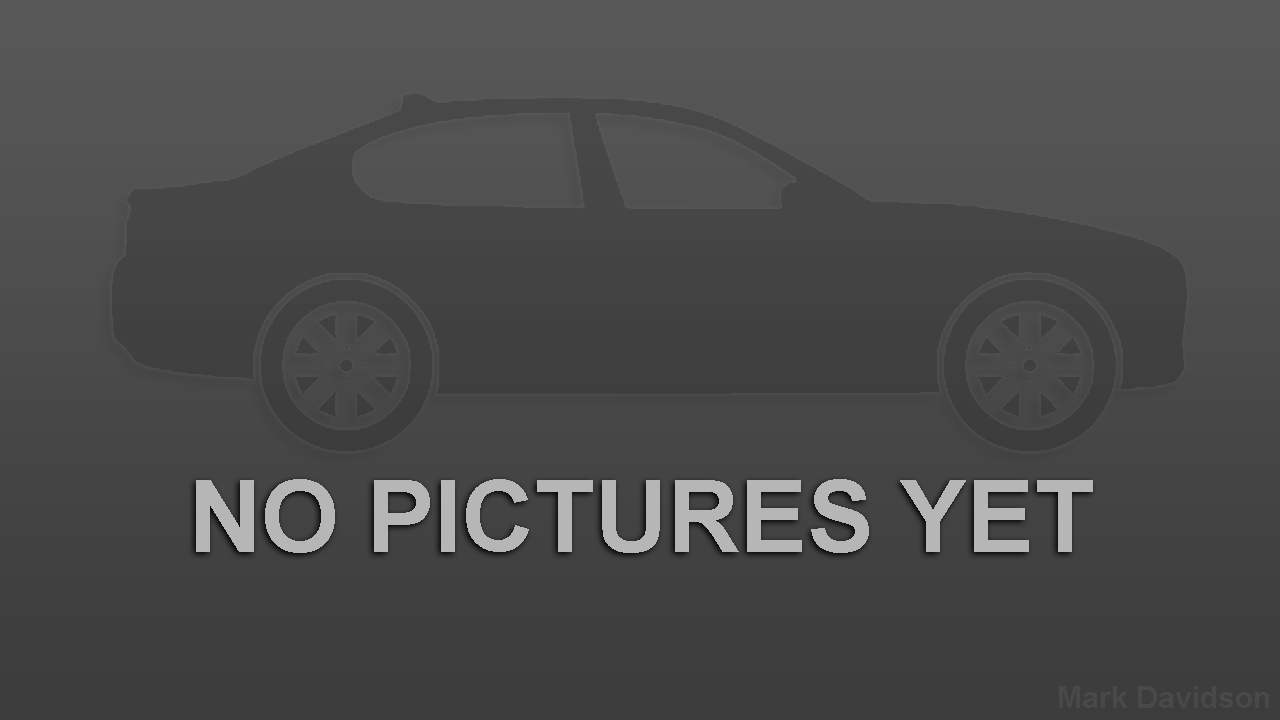
<style>
.page{position:relative;width:1280px;height:720px}
.page>*{position:absolute;margin:0}
.t1{font:100.3px "Arial-BoldMT";color:#b6b6b6}
.t2{font:30px "Arial-BoldMT";color:#494949}
</style>
<div class="page">
<p class="t1" style="left:196px;top:479px;width:897px;height:74px">NO PICTURES YET</p>
<p class="t2" style="left:1059px;top:686px;width:210px;height:22px">Mark Davidson</p>
</div>
